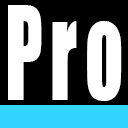
<style>
.page{position:relative;width:128px;height:128px;background:#000000}
.page>*{position:absolute;margin:0}
.t1{font:120px "Impact";letter-spacing:0.1em;color:#ffffff;scale:0.62 1}
</style>
<div class="page">
<p class="t1" style="left:8px;top:5px;width:114px;height:96px">Pro</p>
</div>
